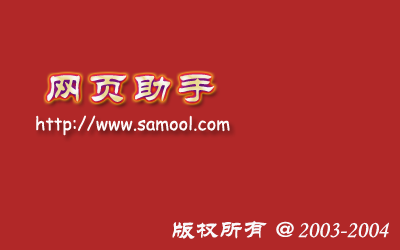
<style>
.page{position:relative;width:400px;height:250px;background:#b12828}
.page>*{position:absolute;margin:0}
.t1{font:40px "STLiti";letter-spacing:0.1em}
.t2{font:18px "ComicSansMS";color:#fdf9f9}
.t3{font:24px "STLiti";color:#f9f9fb}
</style>
<div class="page">
<p class="t1" style="left:47px;top:74px;width:168px;height:28px">网页助手</p>
<p class="t2" style="left:36px;top:115px;width:194px;height:21px">http://www.samool.com</p>
<p class="t3" style="left:172px;top:220px;width:217px;height:19px">版权所有 ＠2003-2004</p>
</div>
